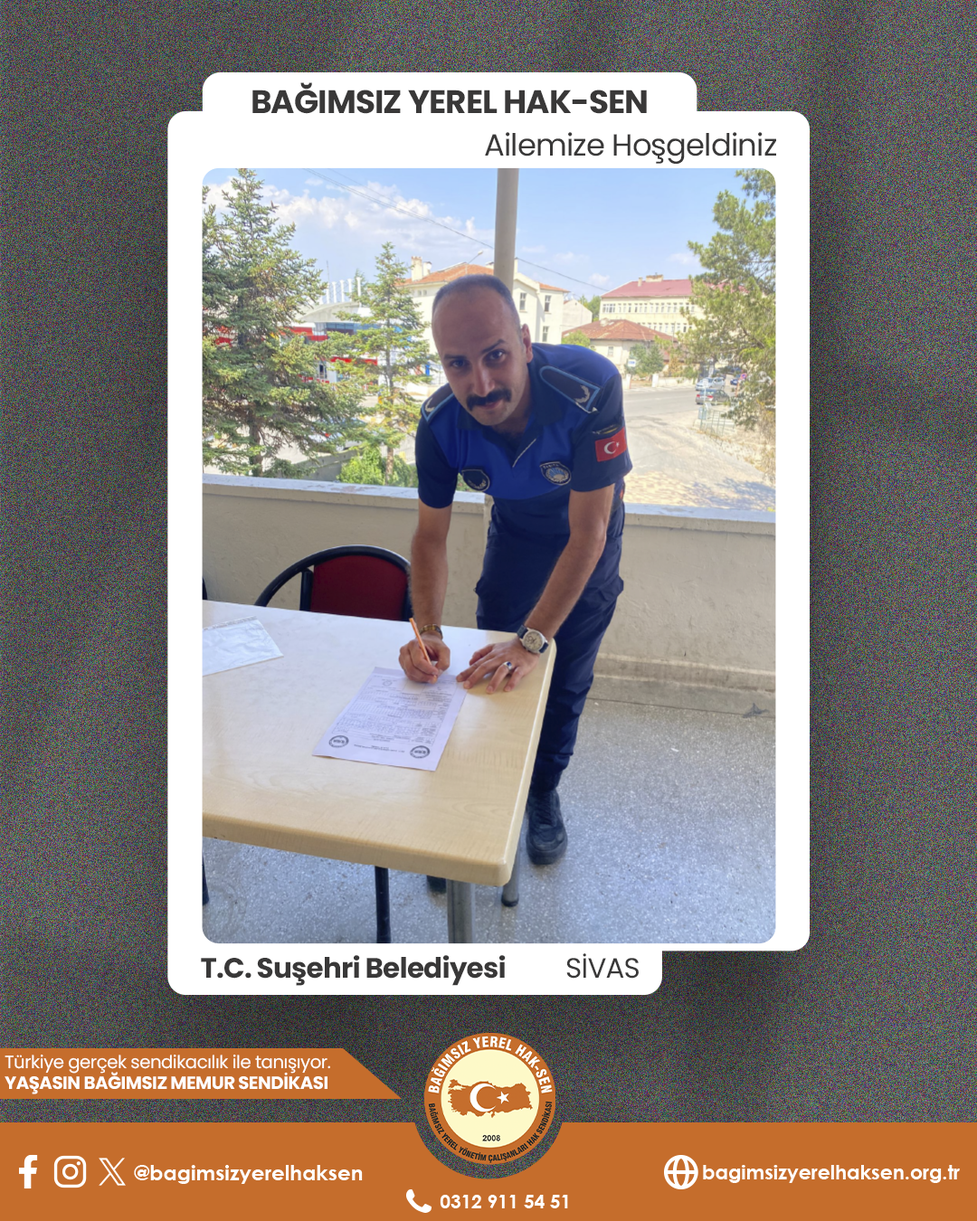
<style>
.page{position:relative;width:977px;height:1221px}
.page>*{position:absolute;margin:0}
.t1{font:32.4px "Poppins-Bold";letter-spacing:-0.025em;color:#393838}
.t2{font:30.6px "Poppins-Regular";letter-spacing:-0.025em;color:#393838}
.t3{font:28px "Poppins-Regular";letter-spacing:-0.025em;color:#393838}
.t4{font:28px "Poppins-Bold";letter-spacing:-0.025em;color:#393838}
.t5{font:17.8px "Poppins-Regular";letter-spacing:-0.025em;color:#ffffff}
.t6{font:17.8px "Poppins-Bold";letter-spacing:-0.025em;color:#ffffff}
</style>
<div class="page">
<p class="t1" style="left:252px;top:82px;width:395px;height:32px">BAĞIMSIZ YEREL HAK-SEN</p>
<p class="t2" style="left:485px;top:132px;width:291px;height:33px">Ailemize Hoşgeldiniz</p>
<p class="t3" style="left:566px;top:953px;width:72px;height:26px">SİVAS</p>
<p class="t4" style="left:201px;top:955px;width:305px;height:31px">T.C. Suşehri Belediyesi</p>
<p class="t5" style="left:5px;top:1054px;width:325px;height:40px">Türkiye gerçek sendikacılık ile tanışıyor.<br><span class="t6">YAŞASIN BAĞIMSIZ MEMUR SENDİKASI</span></p>
</div>
